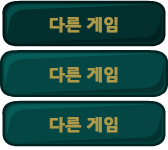
<style>
.page{position:relative;width:168px;height:150px;background:#044643}
.page>*{position:absolute;margin:0}
.t1{font:17px "NanumGothicExtraBold";color:#ab9a4a;font-weight:bold}
</style>
<div class="page">
<p class="t1" style="left:49px;top:17px;width:69px;height:16px">다른 게임</p>
<p class="t1" style="left:49px;top:67px;width:69px;height:16px">다른 게임</p>
<p class="t1" style="left:49px;top:117px;width:69px;height:16px">다른 게임</p>
</div>
